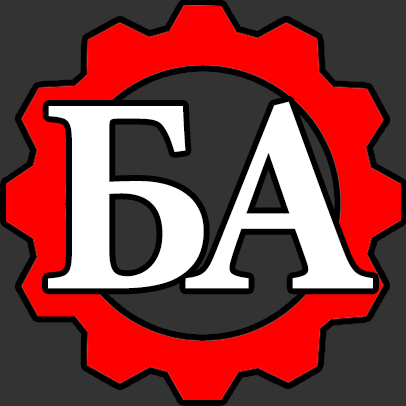
<style>
.page{position:relative;width:406px;height:406px;background:#333333}
.page>*{position:absolute;margin:0}
.t1{font:280px "MinionPro-Bold";letter-spacing:-0.1em;color:#ffffff}
</style>
<div class="page">
<p class="t1" style="left:48px;top:101px;width:325px;height:188px">БА</p>
</div>
